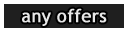
<style>
.page{position:relative;width:128px;height:32px;background:#1f1f1f}
.page>*{position:absolute;margin:0}
.t1{font:18px "TrebuchetMS";color:#e6e6e6;font-weight:bold}
</style>
<div class="page">
<p class="t1" style="left:22px;top:8px;width:85px;height:18px">any offers</p>
</div>
